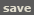
<style>
.page{position:relative;width:34px;height:15px;background:#5a5a5a}
.page>*{position:absolute;margin:0}
.t1{font:11px "Verdana-Bold";color:#dedbcb}
</style>
<div class="page">
<p class="t1" style="left:3px;top:6px;width:28px;height:6px">save</p>
</div>
